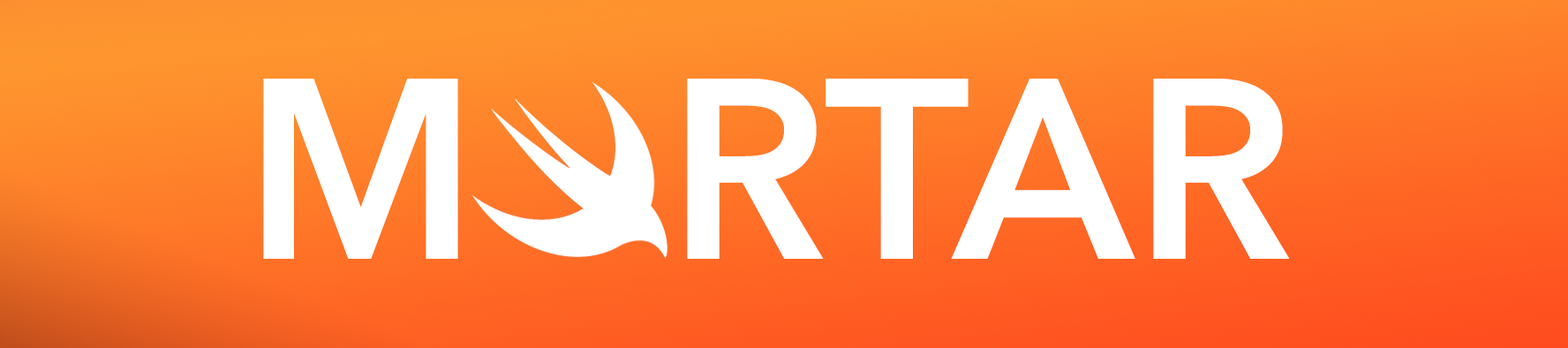
<style>
.page{position:relative;width:1568px;height:348px}
.page>*{position:absolute;margin:0}
.t1{font:254.3px "AvenirNext-DemiBold";color:#ffffff}
</style>
<div class="page">
<p class="t1" style="left:263px;top:79px;width:1027px;height:180px">M   RTAR</p>
</div>
